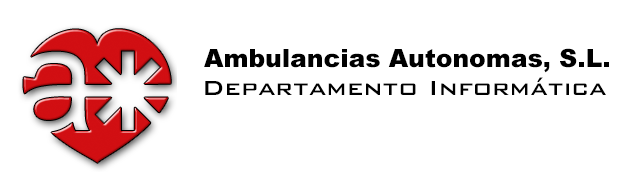
<style>
.page{position:relative;width:640px;height:187px;background:#ffffff}
.page>*{position:absolute;margin:0}
.t1{font:25px "Arial-Black";color:#000000}
.t2{font:27px "BankGothic-Medium";color:#000000}
</style>
<div class="page">
<p class="t1" style="left:204px;top:48px;width:405px;height:25px">Ambulancias Autonomas, S.L.</p>
<p class="t2" style="left:205px;top:77px;width:401px;height:18px">Departamento Informática</p>
</div>
